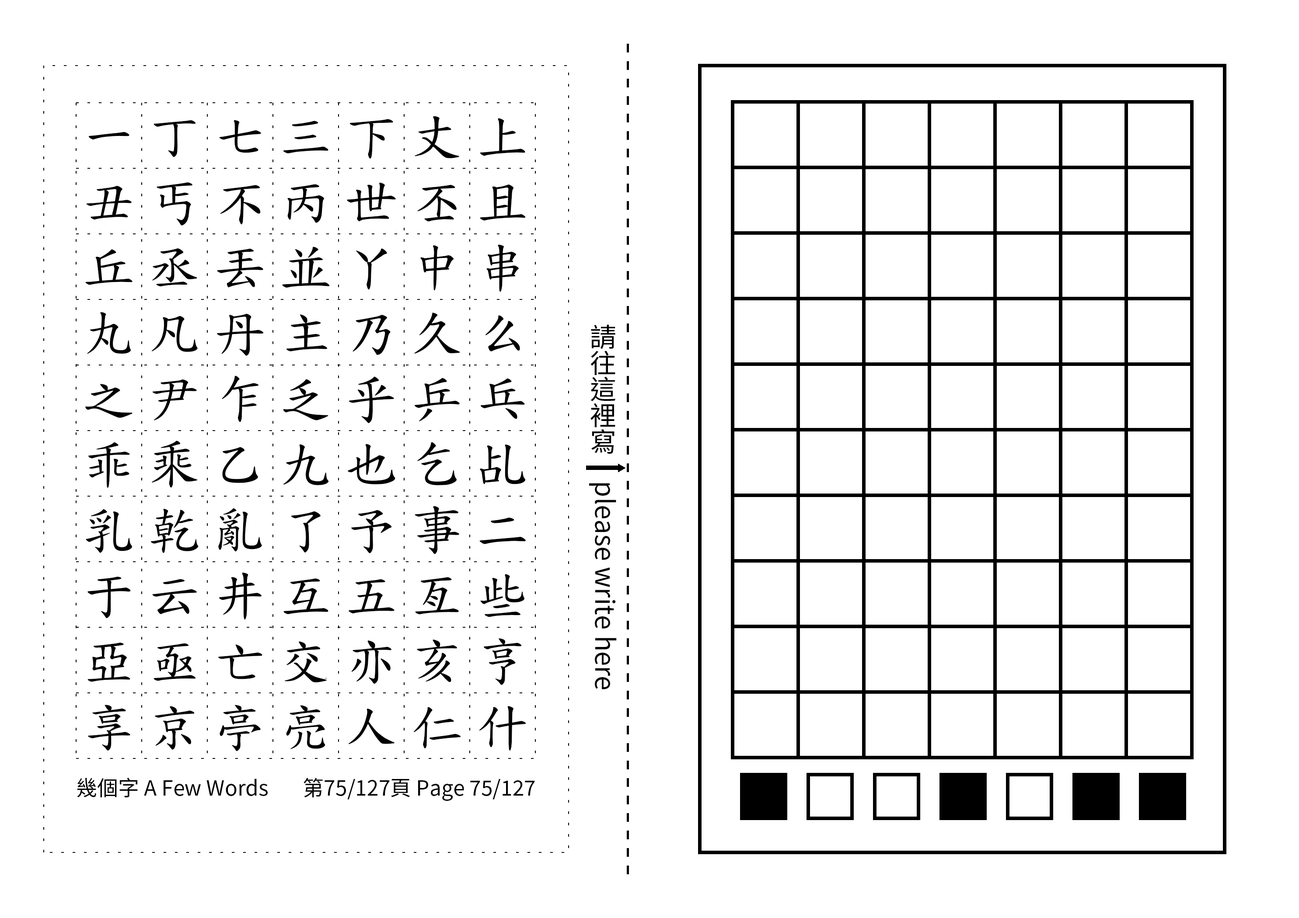
<style>
.page{position:relative;width:1299px;height:918px;background:#ffffff}
.page>*{position:absolute;margin:0}
.t1{font:52.5px/65.6px "TW-Kai-98_1";letter-spacing:0.25em;color:#000000}
.t2{font:26.2px "SourceHanSansTC-Regular";color:#000000}
.t3{font:21px "SourceHanSansTC-Regular";color:#000000}
</style>
<div class="page">
<p class="t1" style="left:85px;top:116px;width:441px;height:636px;text-align:center">一丁七三下丈上丑丐不丙世丕且丘丞丟並丫中串丸凡丹主乃久么之尹乍乏乎乒乓乖乘乙九也乞乩乳乾亂了予事二于云井互五亙些亞亟亡交亦亥亨享京亭亮人仁什</p>
<p class="t2" style="left:589px;top:324px;width:28px;height:366px;text-align:center">請往這裡寫　please write here</p>
<p class="t3" style="left:77px;top:778px;width:191px;height:20px">幾個字 A Few Words</p>
<p class="t3" style="left:303px;top:778px;width:232px;height:23px">第75/127頁 Page 75/127</p>
</div>
